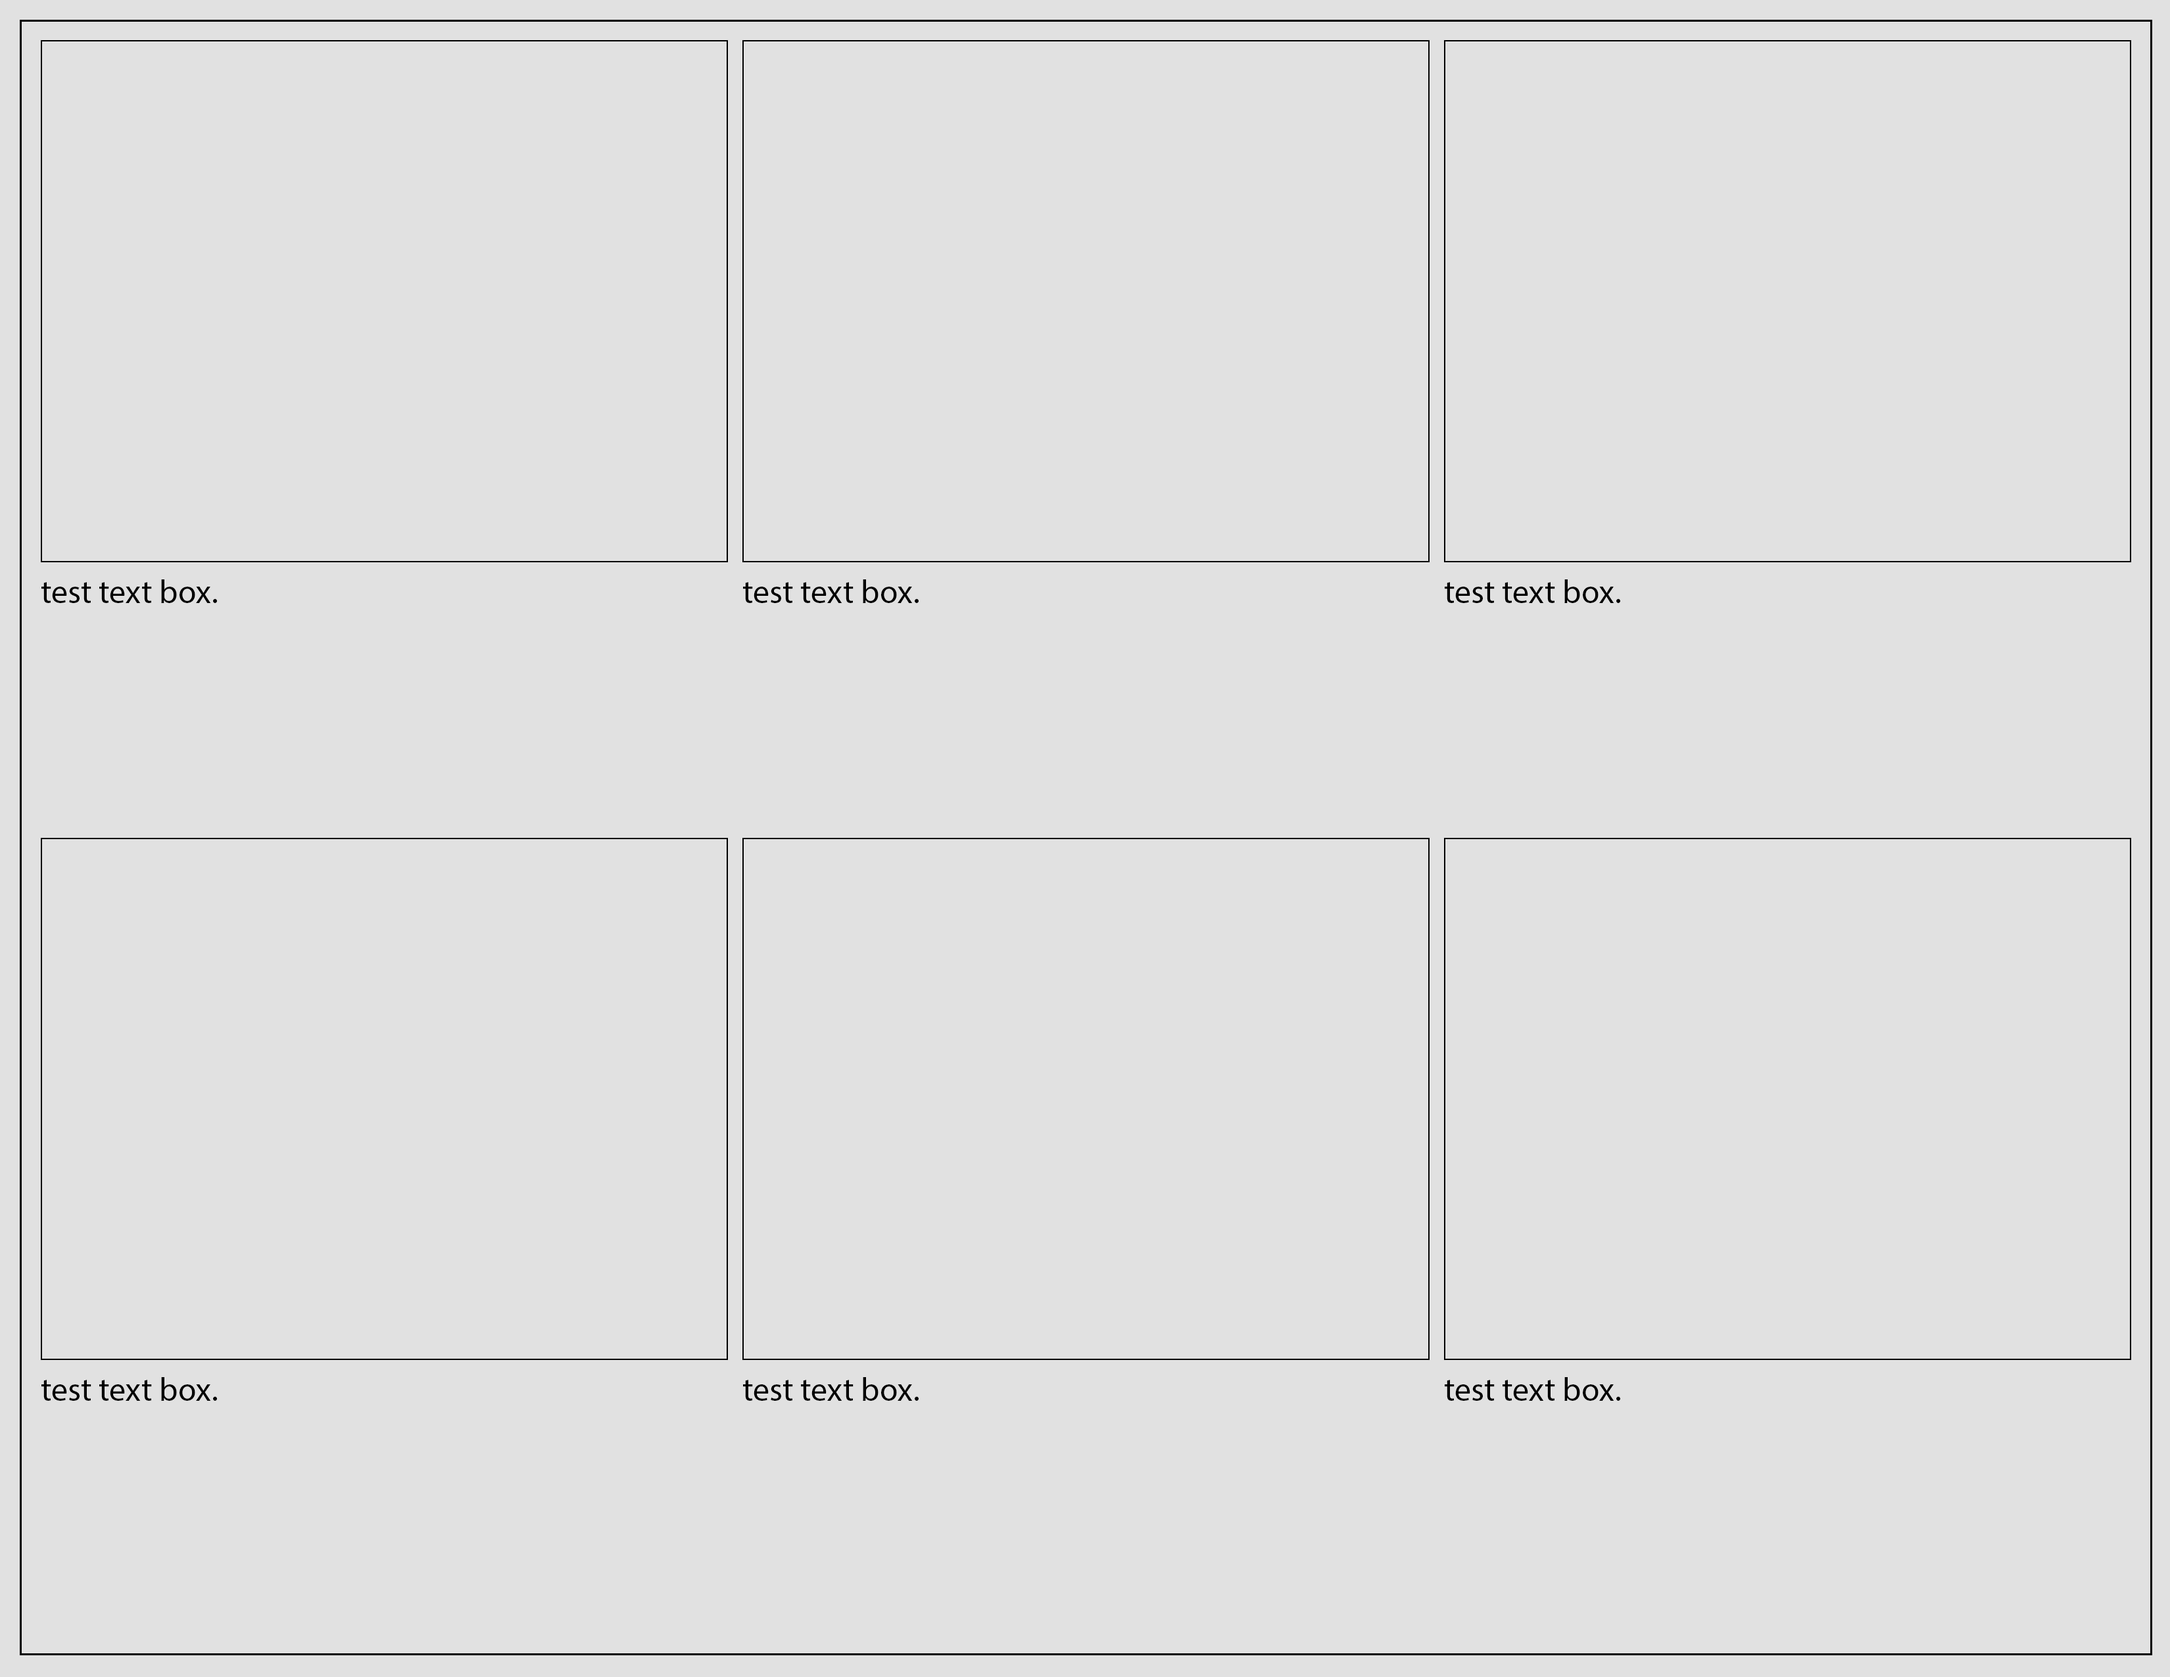
<style>
.page{position:relative;width:2170px;height:1677px;background:#e1e1e1}
.page>*{position:absolute;margin:0}
.t1{font:7.9px "MyriadPro-Regular";color:#000000}
</style>
<div class="page">
<p class="t1" style="left:41px;top:579px;width:176px;height:24px">test text box.</p>
<p class="t1" style="left:743px;top:579px;width:176px;height:24px">test text box.</p>
<p class="t1" style="left:1445px;top:579px;width:175px;height:24px">test text box.</p>
<p class="t1" style="left:41px;top:1377px;width:176px;height:24px">test text box.</p>
<p class="t1" style="left:743px;top:1377px;width:176px;height:24px">test text box.</p>
<p class="t1" style="left:1445px;top:1377px;width:175px;height:24px">test text box.</p>
</div>
